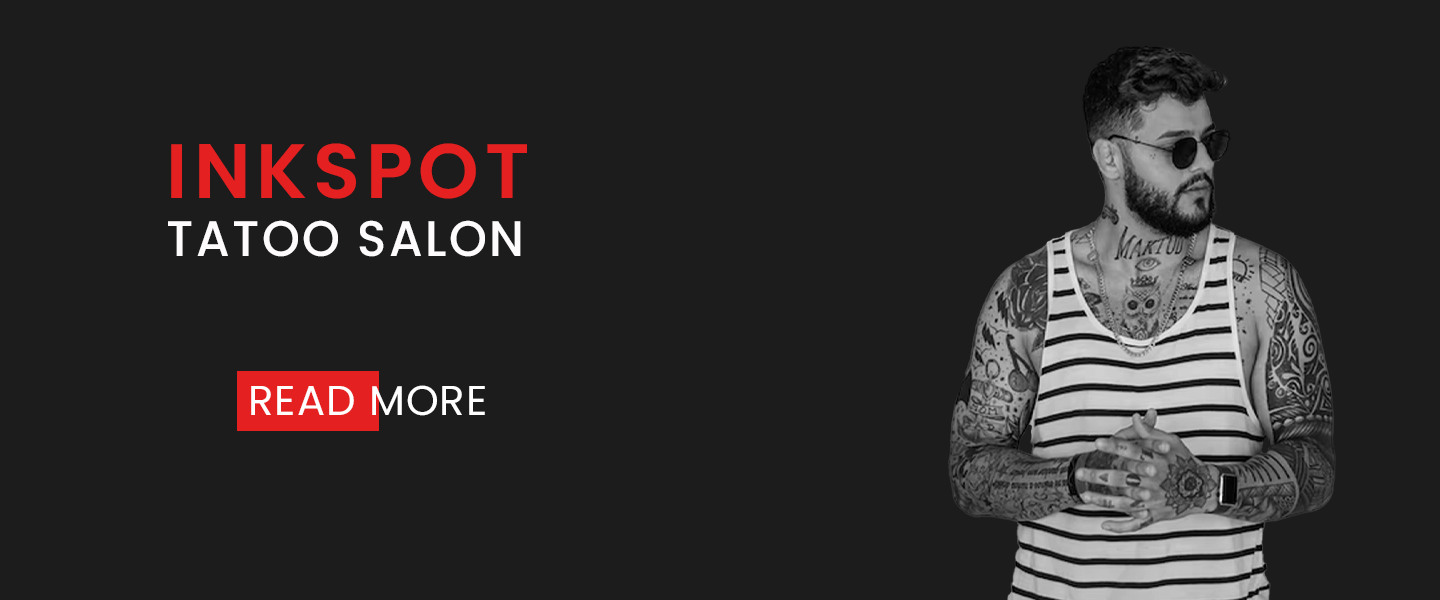
<style>
.page{position:relative;width:1440px;height:600px;background:#1c1c1c}
.page>*{position:absolute;margin:0}
.t1{font:77.1px "Poppins-SemiBold";letter-spacing:0.075em;color:#e52020;text-transform:uppercase}
.t2{font:50px "Poppins-Medium";letter-spacing:0.05em;color:#fdfbfb;text-transform:uppercase;scale:0.97 1}
.t3{font:41.7px "Poppins-Regular";letter-spacing:0.025em;color:#ffffff;text-transform:uppercase}
</style>
<div class="page">
<p class="t1" style="left:171px;top:143px;width:356px;height:56px">inkspot</p>
<p class="t2" style="left:168px;top:220px;width:353px;height:37px">tatoo salon</p>
<p class="t3" style="left:251px;top:385px;width:234px;height:31px">read more</p>
</div>
